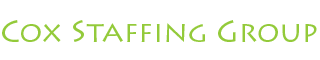
<style>
.page{position:relative;width:320px;height:60px;background:#ffffff}
.page>*{position:absolute;margin:0}
.t1{font:30px "LithosPro-Regular";color:#93ca3a}
</style>
<div class="page">
<p class="t1" style="left:2px;top:20px;width:315px;height:22px">Cox Staffing Group</p>
</div>
